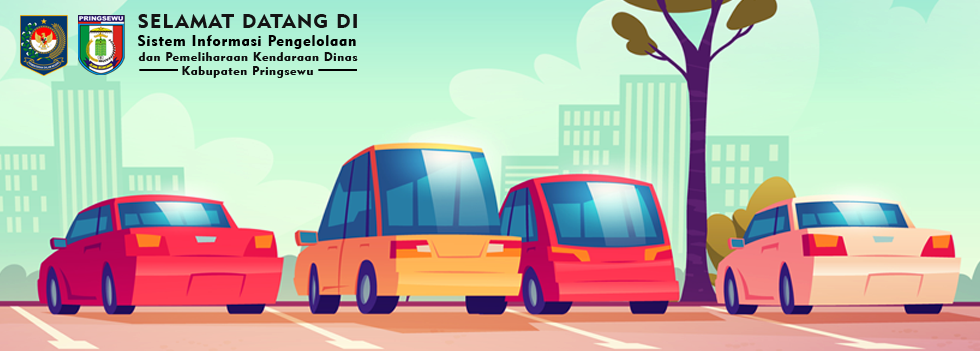
<style>
.page{position:relative;width:980px;height:351px}
.page>*{position:absolute;margin:0}
.t1{font:20.1px "Geometric415BT-BlackA";letter-spacing:0.05em;color:#131313}
.t2{font:15px "Geometric415BT-BlackA";letter-spacing:0.05em;color:#000000}
.t3{font:12.4px "Geometric415BT-BlackA";letter-spacing:0.05em;color:#0c0c0c}
</style>
<div class="page">
<p class="t1" style="left:138px;top:14px;width:219px;height:14px">SELAMAT DATANG DI</p>
<p class="t2" style="left:138px;top:35px;width:218px;height:14px">Sistem Informasi Pengelolaan</p>
<p class="t3" style="left:138px;top:52px;width:220px;height:9px">dan Pemeliharaan Kendaraan Dinas</p>
<p class="t3" style="left:182px;top:66px;width:131px;height:12px">Kabupaten Pringsewu</p>
</div>
